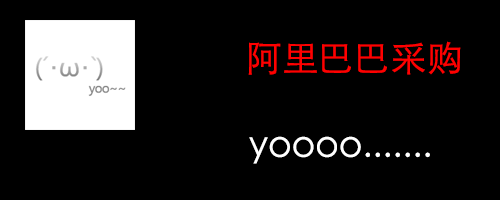
<style>
.page{position:relative;width:500px;height:200px;background:#000000}
.page>*{position:absolute;margin:0}
.t1{font:36px "STHeitiSC-Light";color:#ff0000}
.t2{font:36px "STHeitiSC-Light";color:#ffffff}
</style>
<div class="page">
<p class="t1" style="left:248px;top:41px;width:213px;height:34px">阿里巴巴采购</p>
<p class="t2" style="left:249px;top:136px;width:181px;height:28px">yoooo.......</p>
</div>
